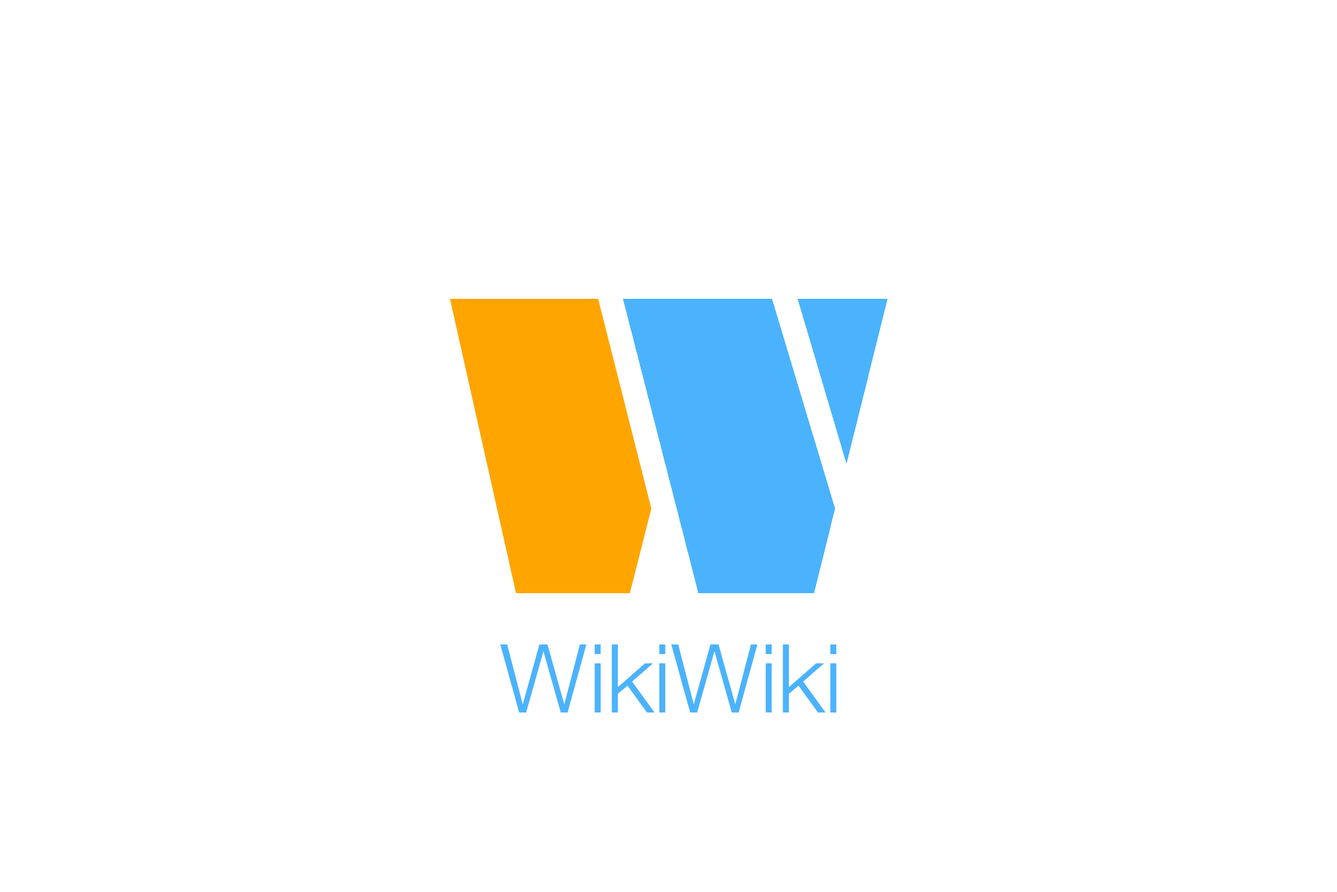
<style>
.page{position:relative;width:1337px;height:892px;background:#ffffff}
.page>*{position:absolute;margin:0}
.t1{font:95px "HelveticaNeue-Light";color:#4bb3fd}
</style>
<div class="page">
<p class="t1" style="left:500px;top:644px;width:337px;height:68px">WikiWiki</p>
</div>
